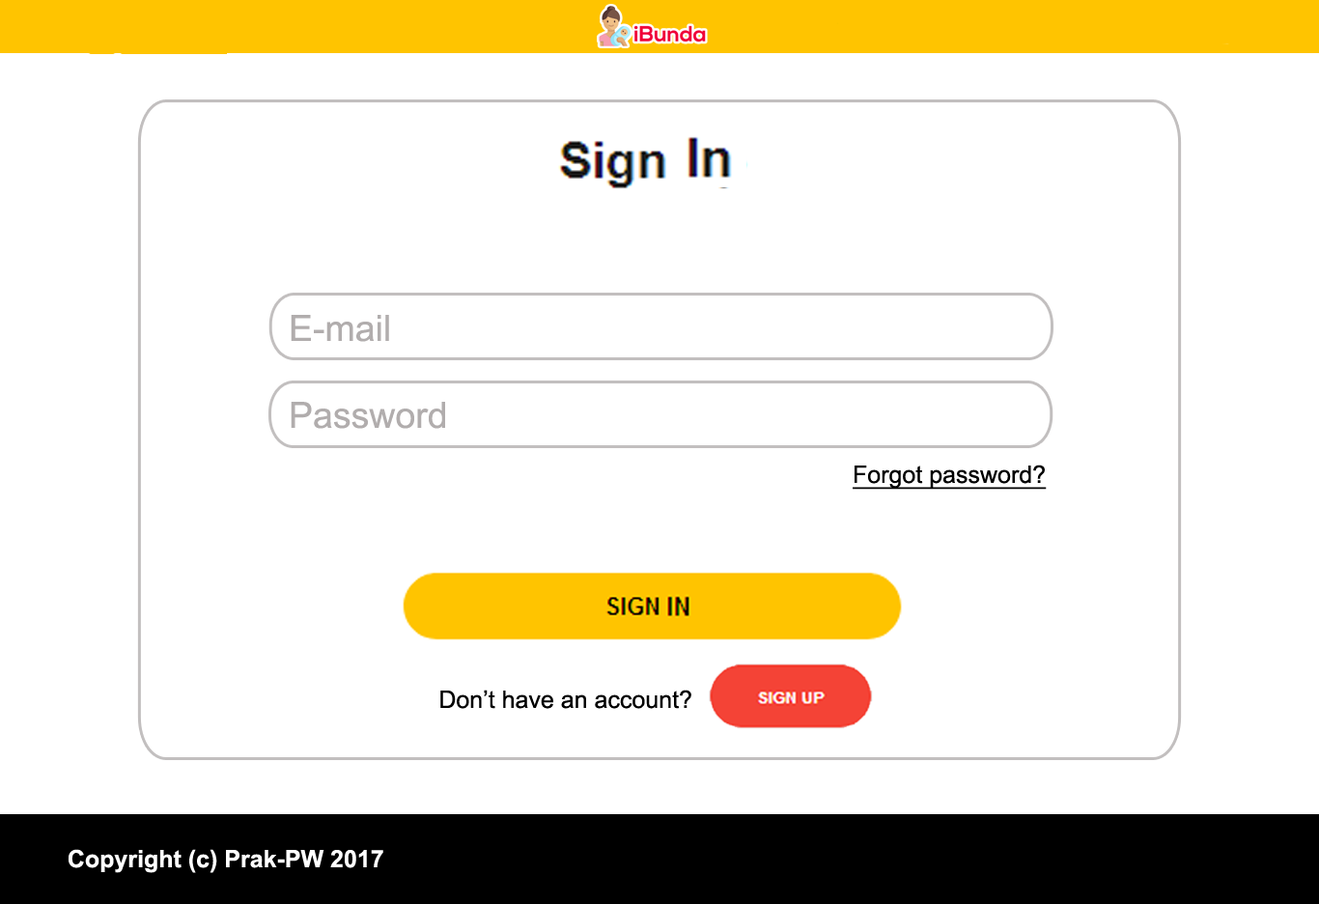
<style>
.page{position:relative;width:1319px;height:904px;background:#ffffff}
.page>*{position:absolute;margin:0}
.t1{font:36.2px "ArialMT";color:#b1adad}
.t2{font:24.1px "ArialMT";color:#000000;text-decoration:underline}
.t3{font:24.1px "ArialMT";color:#000000}
.t4{font:24.1px "Arial-BoldMT";color:#ffffff}
</style>
<div class="page">
<p class="t1" style="left:291px;top:315px;width:154px;height:114px">E-mail<br><br>Password</p>
<p class="t2" style="left:853px;top:465px;width:194px;height:25px">Forgot password?</p>
<p class="t3" style="left:440px;top:690px;width:251px;height:19px">Don’t have an account?</p>
<p class="t4" style="left:68px;top:849px;width:315px;height:24px">Copyright (c) Prak-PW 2017</p>
</div>
